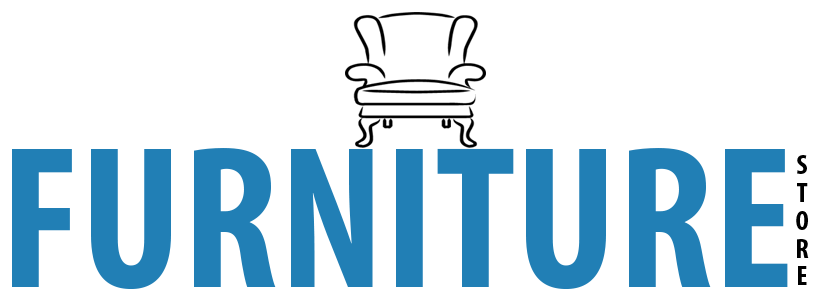
<style>
.page{position:relative;width:823px;height:307px;background:#ffffff}
.page>*{position:absolute;margin:0}
.t1{font:204.2px "MyriadPro-BoldCond";color:#275a94}
</style>
<div class="page">
<p class="t1" style="left:12px;top:148px;width:776px;height:141px">FURNITURE</p>
</div>
